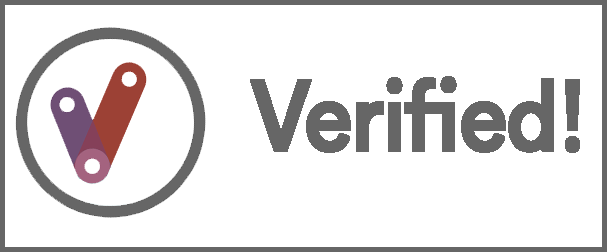
<style>
.page{position:relative;width:607px;height:252px;background:#ffffff}
.page>*{position:absolute;margin:0}
.t1{font:100px "CircularStd-Medium";letter-spacing:-0.05em;color:#666666;font-weight:bold;scale:0.9 1}
</style>
<div class="page">
<p class="t1" style="left:250px;top:76px;width:330px;height:77px">Verified!</p>
</div>
